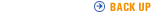
<style>
.page{position:relative;width:160px;height:13px;background:#ffffff}
.page>*{position:absolute;margin:0}
.t1{font:12px "Univers-Condensed-Bold";color:#f39000}
</style>
<div class="page">
<p class="t1" style="left:110px;top:2px;width:41px;height:9px">BACK UP</p>
</div>
